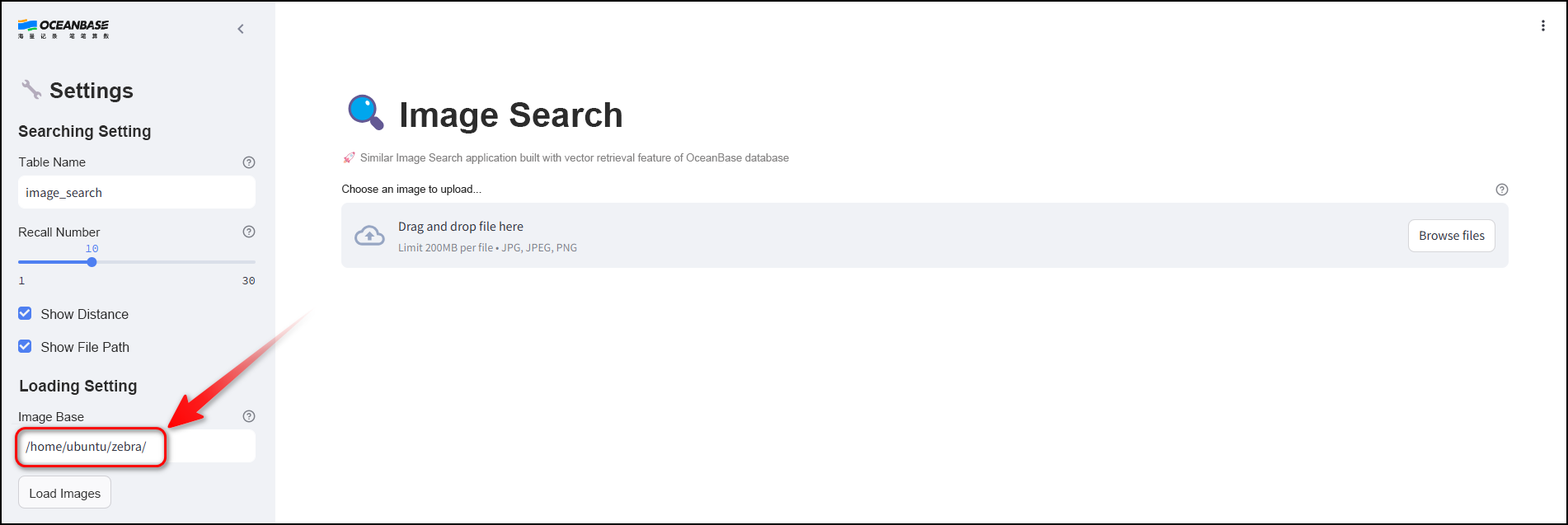
<style>
.page{position:relative;width:1568px;height:525px;background:#ffffff}
.page>*{position:absolute;margin:0}
.t1{font:21.4px "Arial-BoldMT";color:#2c2c2c}
.t2{font:34.6px "Arial-BoldMT";color:#2c2c2c}
.t3{font:15.7px "Arial-BoldMT";color:#2c2c2c}
.t4{font:12.4px "ArialMT";color:#2c2c2c}
.t5{font:10.7px "ArialMT";color:#858484}
.t6{font:10.7px "ArialMT";color:#282828}
.t7{font:13.2px/33px "ArialMT";color:#2c2c2c}
.t8{font:12.4px "ArialMT";color:#323232}
</style>
<div class="page">
<p class="t1" style="left:49px;top:82px;width:85px;height:20px">Settings</p>
<p class="t2" style="left:401px;top:102px;width:221px;height:32px">Image Search</p>
<p class="t3" style="left:18px;top:125px;width:133px;height:15px">Searching Setting</p>
<p class="t4" style="left:18px;top:157px;width:68px;height:10px">Table Name</p>
<p class="t5" style="left:360px;top:153px;width:429px;height:11px">Similar Image Search application built with vector retrieval feature of OceanBase database</p>
<p class="t6" style="left:342px;top:185px;width:139px;height:10px">Choose an image to upload...</p>
<p class="t4" style="left:19px;top:228px;width:82px;height:9px">Recall Number</p>
<p class="t7" style="left:41px;top:309px;width:88px;height:43px">Show Distance<br>Show File Path</p>
<p class="t3" style="left:20px;top:380px;width:117px;height:15px">Loading Setting</p>
<p class="t4" style="left:19px;top:412px;width:65px;height:12px">Image Base</p>
<p class="t8" style="left:30px;top:489px;width:71px;height:11px">Load Images</p>
</div>
